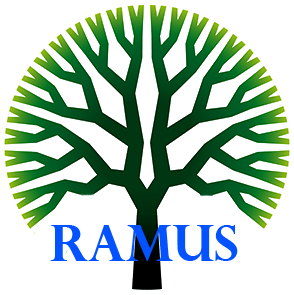
<style>
.page{position:relative;width:294px;height:295px;background:#ffffff}
.page>*{position:absolute;margin:0}
.t1{font:49.7px "PerpetuaTitlingMT-Bold";color:#0352ff;scale:0.97 1}
</style>
<div class="page">
<p class="t1" style="left:50px;top:225px;width:188px;height:36px">Ramus</p>
</div>
